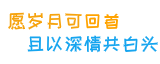
<style>
.page{position:relative;width:160px;height:64px;background:#ffffff}
.page>*{position:absolute;margin:0}
.t1{font:19px "HappyZcool-2016";color:#17a5ef}
.t2{font:19px "HappyZcool-2016";color:#f6a30e}
.t3{font:19px "HappyZcool-2016";color:#ffa300}
</style>
<div class="page">
<p class="t1" style="left:8px;top:12px;width:150px;height:41px"><span class="t2">愿岁月可</span><span class="t3">回首<br> </span>且以深情共白头</p>
</div>
